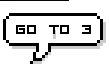
<style>
.page{position:relative;width:109px;height:69px;background:#ffffff}
.page>*{position:absolute;margin:0}
.t1{font:24px "VisitorTT2BRK";color:#000000;text-transform:uppercase}
</style>
<div class="page">
<p class="t1" style="left:16px;top:25px;width:75px;height:9px">go to 3</p>
</div>
